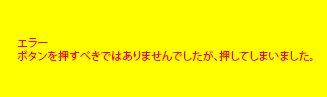
<style>
.page{position:relative;width:327px;height:97px;background:#ffff00}
.page>*{position:absolute;margin:0}
.t1{font:10.9px "KozGoPr6N-Regular";color:#ff0000}
</style>
<div class="page">
<p class="t1" style="left:17px;top:38px;width:296px;height:24px">エラー<br>ボタンを押すべきではありませんでしたが、押してしまいました。</p>
</div>
